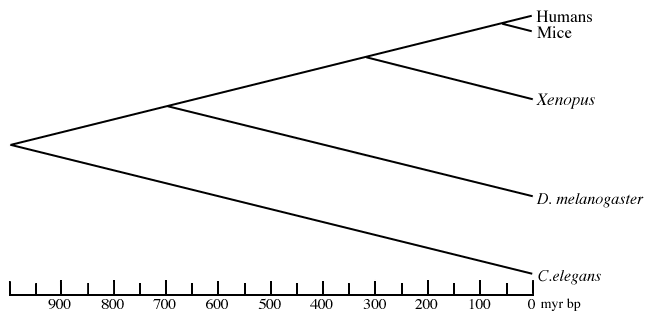
<style>
.page{position:relative;width:650px;height:317px;background:#ffffff}
.page>*{position:absolute;margin:0}
.t1{font:17px "Times-Roman";color:#000000}
.t2{font:17px "Times-Italic";color:#000000}
.t3{font:16px "Times-Italic";color:#000000}
</style>
<div class="page">
<p class="t1" style="left:536px;top:10px;width:56px;height:12px">Humans</p>
<p class="t1" style="left:537px;top:26px;width:35px;height:12px">Mice</p>
<p class="t2" style="left:536px;top:93px;width:59px;height:16px">Xenopus</p>
<p class="t3" style="left:536px;top:193px;width:108px;height:15px">D. melanogaster</p>
<p class="t3" style="left:538px;top:270px;width:63px;height:15px">C.elegans</p>
</div>
